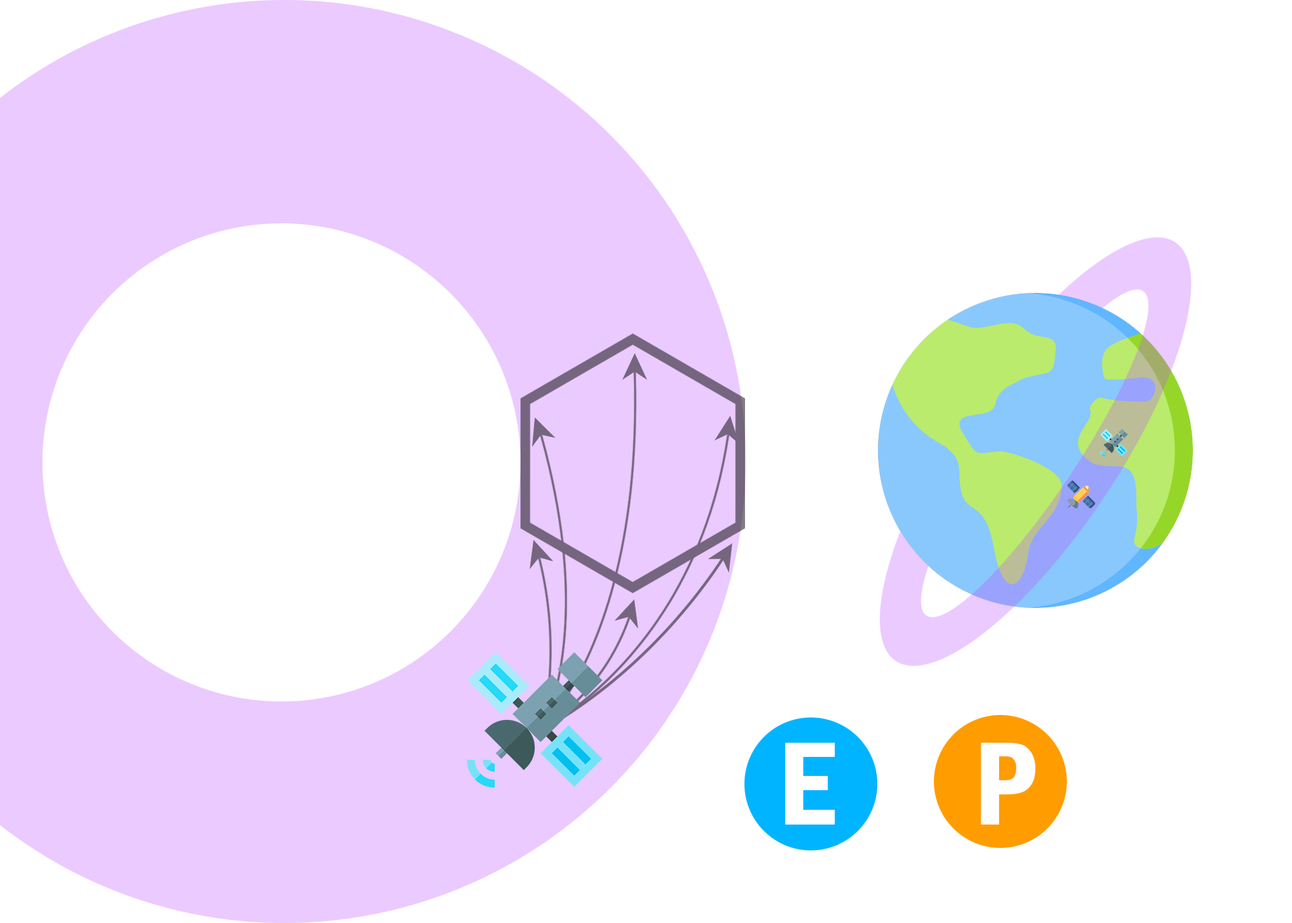
<style>
.page{position:relative;width:1292px;height:923px;background:#ffffff}
.page>*{position:absolute;margin:0}
.t1{font:123.1px "FranklinGothic-DemiCond";color:#ffffff}
.t2{font:122.8px "FranklinGothic-DemiCond";color:#ffffff}
</style>
<div class="page">
<p class="t1" style="left:785px;top:743px;width:50px;height:81px">E</p>
<p class="t2" style="left:981px;top:743px;width:54px;height:81px">P</p>
</div>
